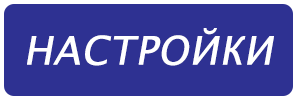
<style>
.page{position:relative;width:300px;height:100px;background:#2e3192}
.page>*{position:absolute;margin:0}
.t1{font:39px "LucidaSansUnicode";color:#ffffff;text-transform:uppercase;font-weight:bold;font-style:italic}
.t2{font:18px "Tahoma";color:#ffffff}
</style>
<div class="page">
<p class="t1" style="left:27px;top:28px;width:247px;height:38px"><span class="t2"><br></span>Настройки</p>
</div>
